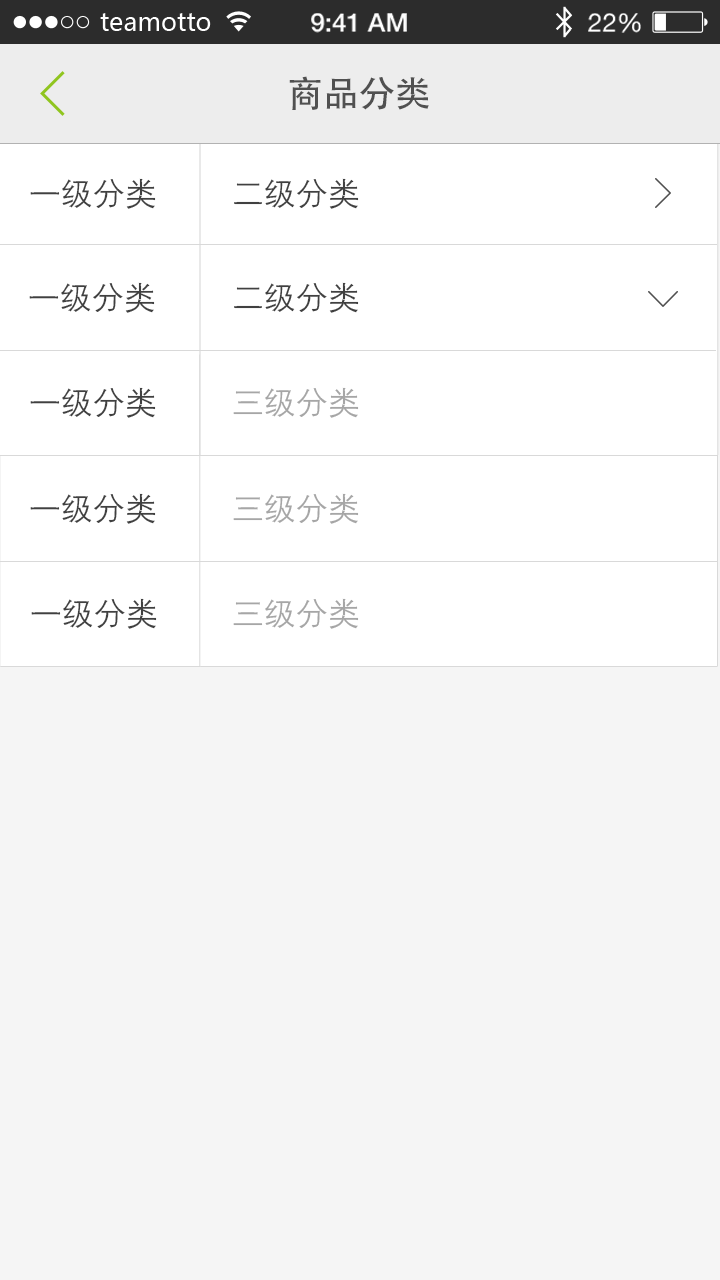
<style>
.page{position:relative;width:720px;height:1280px;background:#f5f5f5}
.page>*{position:absolute;margin:0}
.t1{font:36px "AdobeHeitiStd-Regular";color:#505050}
.t2{font:32px "FZZDXJW--GB1-0";color:#404040}
.t3{font:32px "FZZDXJW--GB1-0";color:#a6a6a6}
</style>
<div class="page">
<p class="t1" style="left:289px;top:76px;width:140px;height:34px">商品分类</p>
<p class="t2" style="left:30px;top:178px;width:126px;height:31px">一级分类</p>
<p class="t2" style="left:234px;top:178px;width:125px;height:31px">二级分类</p>
<p class="t2" style="left:29px;top:282px;width:126px;height:31px">一级分类</p>
<p class="t2" style="left:234px;top:282px;width:125px;height:31px">二级分类</p>
<p class="t2" style="left:30px;top:387px;width:126px;height:31px">一级分类</p>
<p class="t3" style="left:233px;top:387px;width:126px;height:31px"><span class="t2"> </span>三级分类</p>
<p class="t2" style="left:30px;top:493px;width:126px;height:31px">一级分类</p>
<p class="t3" style="left:233px;top:493px;width:126px;height:31px">三级分类</p>
<p class="t2" style="left:31px;top:598px;width:126px;height:31px">一级分类</p>
<p class="t3" style="left:233px;top:598px;width:126px;height:31px">三级分类</p>
</div>
